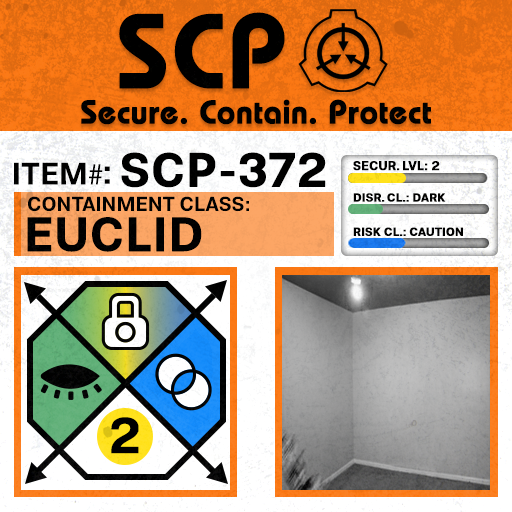
<style>
.page{position:relative;width:512px;height:512px}
.page>*{position:absolute;margin:0}
.t1{font:105.8px "BauhausLT-Demi";color:#000000;font-weight:bold}
.t2{font:33px "BauhausLT-Demi";color:#000000;font-weight:bold}
.t3{font:47.6px "Molde-Semibold";color:#000000;font-weight:bold}
.t4{font:12.5px "Molde-Semibold";color:#000000;font-weight:bold}
.t5{font:31.1px "Molde-Semibold";color:#000000}
.t6{font:31.1px "MyriadPro-Regular";color:#000000}
.t7{font:34.5px "Molde-Semibold";color:#000000}
.t8{font:20.3px "Molde-Semibold";color:#000000}
.t9{font:11.7px "Molde-Semibold";color:#000000;font-weight:bold}
.t10{font:47.8px "Molde-Semibold";color:#000000;font-weight:bold}
</style>
<div class="page">
<p class="t1" style="left:119px;top:12px;width:166px;height:77px">SCP</p>
<p class="t2" style="left:81px;top:99px;width:350px;height:26px">Secure. Contain. Protect</p>
<p class="t3" style="left:121px;top:152px;width:205px;height:36px">SCP-372</p>
<p class="t4" style="left:353px;top:161px;width:87px;height:10px">SECUR. LVL: 2</p>
<p class="t5" style="left:14px;top:162px;width:89px;height:23px">ITEM<span class="t6">#</span></p>
<p class="t7" style="left:104px;top:166px;width:6px;height:18px">:</p>
<p class="t8" style="left:28px;top:196px;width:221px;height:16px">CONTAINMENT CLASS:</p>
<p class="t9" style="left:353px;top:193px;width:93px;height:9px">DISR. CL.: DARK</p>
<p class="t10" style="left:27px;top:217px;width:175px;height:35px">EUCLID</p>
<p class="t9" style="left:353px;top:227px;width:110px;height:9px">RISK CL.: CAUTION</p>
</div>
